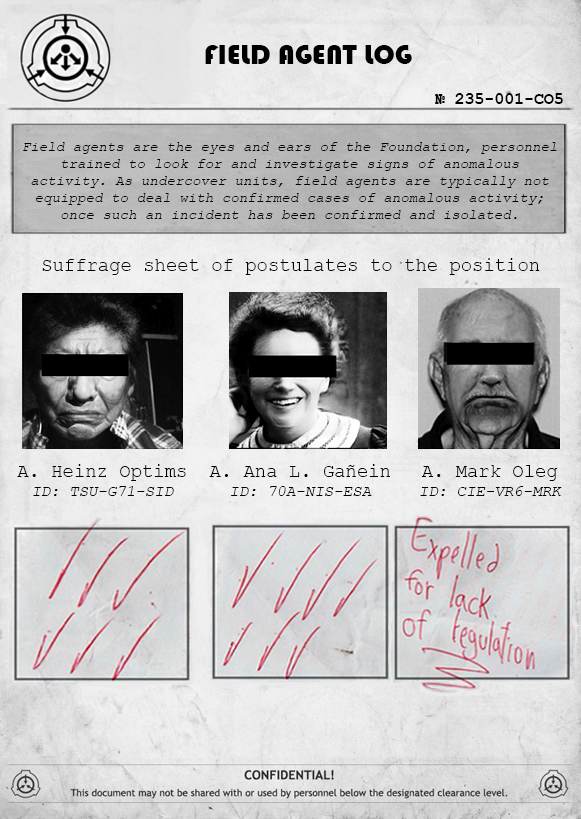
<style>
.page{position:relative;width:581px;height:819px}
.page>*{position:absolute;margin:0}
.t1{font:28.3px "Bauhaus93";color:#000000;text-transform:uppercase}
.t2{font:16.5px "CourierNewPS-BoldMT";color:#000000;text-transform:uppercase}
.t3{font:14.2px "CourierNewPSMT";color:#000000;font-style:italic}
.t4{font:14.2px "CourierNewPS-BoldMT";color:#000000;text-transform:uppercase}
.t5{font:18.9px "CourierNewPSMT";color:#000000}
.t6{font:15.7px "CourierNewPSMT";color:#000000;font-style:italic}
</style>
<div class="page">
<p class="t1" style="left:205px;top:45px;width:207px;height:19px">Field Agent Log</p>
<p class="t2" style="left:435px;top:93px;width:128px;height:11px">№ 235-001-CO5</p>
<p class="t3" style="left:23px;top:142px;width:534px;height:77px;text-align:center"><span class="t4"><br><br></span>Field agents are the eyes and ears of the Foundation, personnel trained to look for and investigate signs of anomalous activity. As undercover units, field agents are typically not equipped to deal with confirmed cases of anomalous activity; once such an incident has been confirmed and isolated.</p>
<p class="t5" style="left:42px;top:258px;width:498px;height:17px">Suffrage sheet of postulates to the position</p>
<p class="t5" style="left:17px;top:464px;width:169px;height:32px;text-align:center">A. Heinz Optims<br><span class="t6">ID: TSU-G71-SID</span></p>
<p class="t5" style="left:209px;top:464px;width:181px;height:32px;text-align:center">A. Ana L. Gañein <br><span class="t6">ID: 70A-NIS-ESA</span></p>
<p class="t6" style="left:420px;top:465px;width:142px;height:31px;text-align:center"><span class="t5">A. Mark Oleg<br></span>ID: CIE-VR6-MRK</p>
</div>
